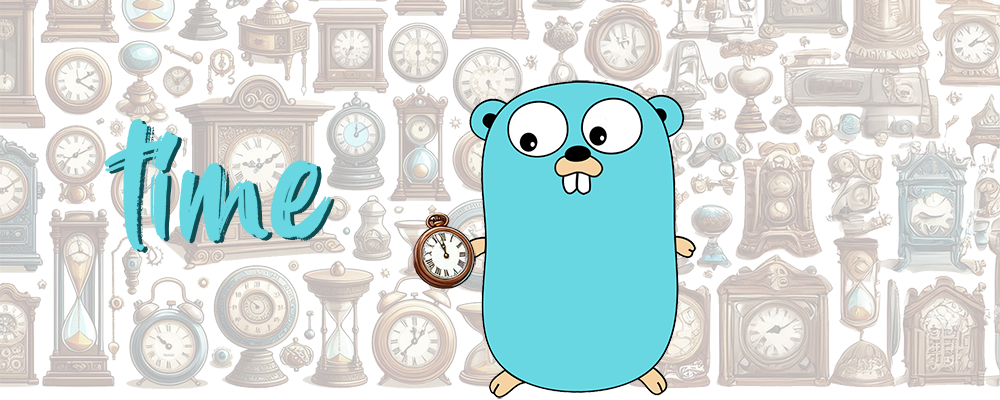
<style>
.page{position:relative;width:1000px;height:400px;background:#ffffff}
.page>*{position:absolute;margin:0}
.t1{font:172.8px "Golang";color:#68d7e2}
</style>
<div class="page">
<p class="t1" style="left:108px;top:120px;width:227px;height:134px">time</p>
</div>
